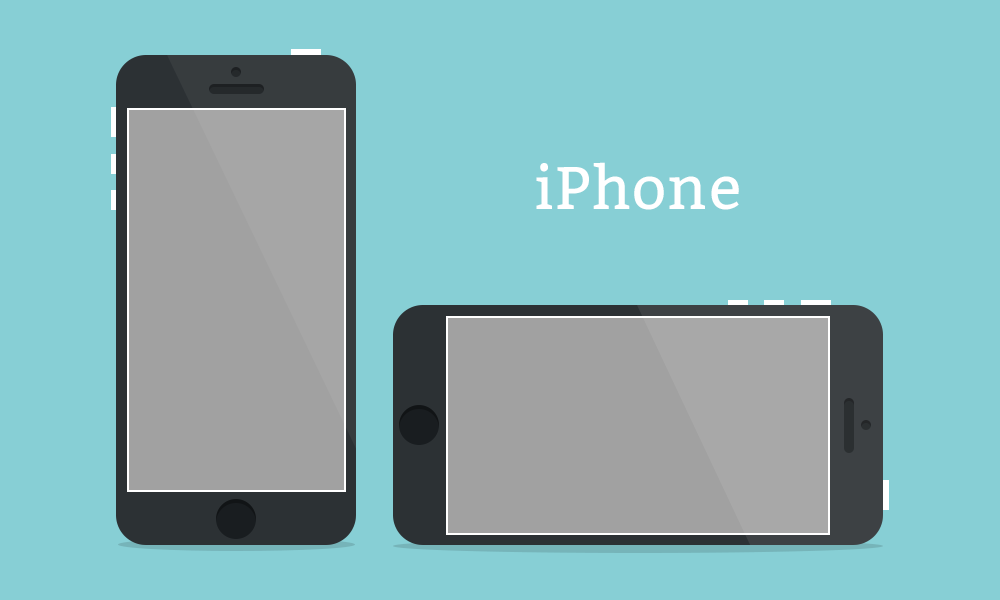
<style>
.page{position:relative;width:1000px;height:600px;background:#87cfd5}
.page>*{position:absolute;margin:0}
.t1{font:60px "Bitter-Regular";letter-spacing:0.02em;color:#ffffff}
</style>
<div class="page">
<p class="t1" style="left:536px;top:162px;width:203px;height:48px">iPhone</p>
</div>
